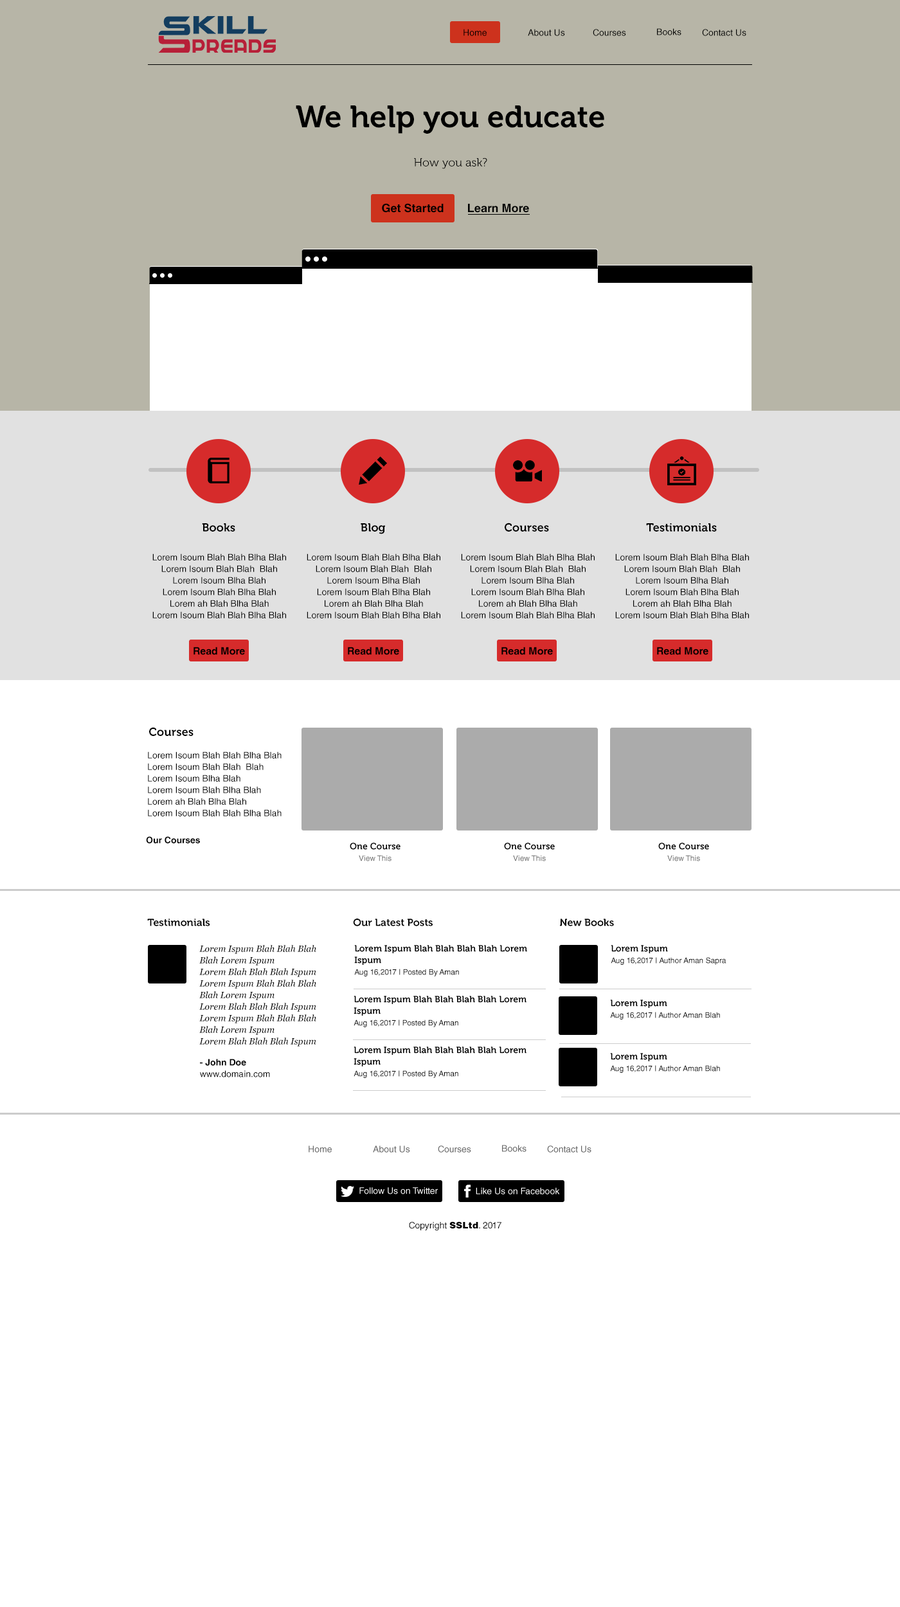
<style>
.page{position:relative;width:900px;height:1607px;background:#ffffff}
.page>*{position:absolute;margin:0}
.t1{font:9px "HelveticaLTStd-Roman";color:#000000}
.t2{font:30.9px "Museo-700";color:#000000}
.t3{font:11.6px "Museo-300";color:#000000}
.t4{font:11.6px "HelveticaLTStd-Bold";color:#000000}
.t5{font:11.6px "Museo-700";color:#000000}
.t6{font:9px/7.3px "HelveticaLTStd-Roman";color:#000000}
.t7{font:10.3px "HelveticaLTStd-Bold";color:#000000}
.t8{font:9px "HelveticaLTStd-Bold";color:#000000}
.t9{font:9px/7.3px "Museo-700";color:#000000}
.t10{font:7.7px/7.3px "HelveticaLTStd-Roman";color:#666666}
.t11{font:10.3px "Museo-700";color:#000000}
.t12{font:9px/11.6px "Georgia-Italic";color:#000000}
.t13{font:9px/11.6px "Museo-700";color:#000000}
.t14{font:7.7px/11.6px "HelveticaLTStd-Roman";color:#000000}
.t15{font:9px/11.6px "HelveticaLTStd-Roman";color:#000000}
.t16{font:9px/11.6px "HelveticaLTStd-Bold";color:#000000}
.t17{font:9px "HelveticaLTStd-Roman";color:#666666}
.t18{font:9px "HelveticaLTStd-Roman";color:#ffffff}
.t19{font:9px "HelveticaLTStd-Blk";color:#000000}
</style>
<div class="page">
<p class="t1" style="left:464px;top:29px;width:23px;height:7px">Home</p>
<p class="t1" style="left:528px;top:29px;width:37px;height:7px">About Us</p>
<p class="t1" style="left:593px;top:29px;width:33px;height:7px">Courses</p>
<p class="t1" style="left:657px;top:28px;width:24px;height:7px">Books</p>
<p class="t1" style="left:702px;top:29px;width:44px;height:7px">Contact Us</p>
<p class="t2" style="left:296px;top:105px;width:308px;height:29px">We help you educate</p>
<p class="t3" style="left:414px;top:158px;width:73px;height:11px">How you ask?</p>
<p class="t4" style="left:382px;top:203px;width:62px;height:10px">Get Started</p>
<p class="t4" style="left:468px;top:204px;width:61px;height:9px">Learn More</p>
<p class="t5" style="left:202px;top:523px;width:33px;height:9px">Books</p>
<p class="t5" style="left:361px;top:523px;width:24px;height:11px">Blog</p>
<p class="t5" style="left:505px;top:523px;width:44px;height:9px">Courses</p>
<p class="t5" style="left:646px;top:523px;width:71px;height:9px">Testimonials</p>
<p class="t6" style="left:152px;top:554px;width:134px;height:64px;text-align:center">Lorem Isoum Blah Blah Blha Blah<br>Lorem Isoum Blah Blah  Blah<br>Lorem Isoum Blha Blah<br>Lorem Isoum Blah Blha Blah<br>Lorem ah Blah Blha Blah<br>Lorem Isoum Blah Blah Blha Blah</p>
<p class="t6" style="left:307px;top:554px;width:133px;height:64px;text-align:center">Lorem Isoum Blah Blah Blha Blah<br>Lorem Isoum Blah Blah  Blah<br>Lorem Isoum Blha Blah<br>Lorem Isoum Blah Blha Blah<br>Lorem ah Blah Blha Blah<br>Lorem Isoum Blah Blah Blha Blah</p>
<p class="t6" style="left:461px;top:554px;width:134px;height:64px;text-align:center">Lorem Isoum Blah Blah Blha Blah<br>Lorem Isoum Blah Blah  Blah<br>Lorem Isoum Blha Blah<br>Lorem Isoum Blah Blha Blah<br>Lorem ah Blah Blha Blah<br>Lorem Isoum Blah Blah Blha Blah</p>
<p class="t6" style="left:615px;top:554px;width:134px;height:64px;text-align:center">Lorem Isoum Blah Blah Blha Blah<br>Lorem Isoum Blah Blah  Blah<br>Lorem Isoum Blha Blah<br>Lorem Isoum Blah Blha Blah<br>Lorem ah Blah Blha Blah<br>Lorem Isoum Blah Blah Blha Blah</p>
<p class="t7" style="left:194px;top:647px;width:51px;height:8px">Read More</p>
<p class="t7" style="left:348px;top:647px;width:51px;height:8px">Read More</p>
<p class="t7" style="left:501px;top:647px;width:52px;height:8px">Read More</p>
<p class="t7" style="left:657px;top:647px;width:51px;height:8px">Read More</p>
<p class="t5" style="left:149px;top:727px;width:45px;height:9px">Courses</p>
<p class="t6" style="left:148px;top:752px;width:134px;height:64px">Lorem Isoum Blah Blah Blha Blah<br>Lorem Isoum Blah Blah  Blah<br>Lorem Isoum Blha Blah<br>Lorem Isoum Blah Blha Blah<br>Lorem ah Blah Blha Blah<br>Lorem Isoum Blah Blah Blha Blah</p>
<p class="t8" style="left:146px;top:836px;width:54px;height:7px">Our Courses</p>
<p class="t9" style="left:350px;top:843px;width:51px;height:18px;text-align:center">One Course<br><span class="t10">View This</span></p>
<p class="t9" style="left:504px;top:843px;width:51px;height:18px;text-align:center">One Course<br><span class="t10">View This</span></p>
<p class="t9" style="left:658px;top:843px;width:51px;height:18px;text-align:center">One Course<br><span class="t10">View This</span></p>
<p class="t11" style="left:147px;top:919px;width:63px;height:7px">Testimonials</p>
<p class="t11" style="left:353px;top:919px;width:80px;height:7px">Our Latest Posts</p>
<p class="t11" style="left:560px;top:919px;width:54px;height:7px">New Books</p>
<p class="t12" style="left:199px;top:945px;width:117px;height:102px">Lorem Ispum Blah Blah Blah<br>Blah Lorem Ispum<br>Lorem Blah Blah Blah Ispum<br>Lorem Ispum Blah Blah Blah<br>Blah Lorem Ispum<br>Lorem Blah Blah Blah Ispum<br>Lorem Ispum Blah Blah Blah<br>Blah Lorem Ispum<br>Lorem Blah Blah Blah Ispum</p>
<p class="t13" style="left:354px;top:945px;width:173px;height:32px">Lorem Ispum Blah Blah Blah Blah Lorem Ispum<br><span class="t14">Aug 16,2017 | Posted By Aman</span></p>
<p class="t14" style="left:611px;top:945px;width:115px;height:20px"><span class="t13">Lorem Ispum<br></span>Aug 16,2017 | Author Aman Sapra</p>
<p class="t13" style="left:354px;top:996px;width:172px;height:31px">Lorem Ispum Blah Blah Blah Blah Lorem Ispum<br><span class="t14">Aug 16,2017 | Posted By Aman</span></p>
<p class="t14" style="left:610px;top:1000px;width:110px;height:20px"><span class="t13">Lorem Ispum<br></span>Aug 16,2017 | Author Aman Blah</p>
<p class="t13" style="left:354px;top:1047px;width:172px;height:31px">Lorem Ispum Blah Blah Blah Blah Lorem Ispum<br><span class="t14">Aug 16,2017 | Posted By Aman</span></p>
<p class="t15" style="left:200px;top:1059px;width:70px;height:18px"><span class="t16">- John Doe<br></span>www.domain.com</p>
<p class="t14" style="left:610px;top:1053px;width:110px;height:20px"><span class="t13">Lorem Ispum<br></span>Aug 16,2017 | Author Aman Blah</p>
<p class="t17" style="left:309px;top:1146px;width:23px;height:7px">Home</p>
<p class="t17" style="left:373px;top:1146px;width:37px;height:7px">About Us</p>
<p class="t17" style="left:438px;top:1146px;width:33px;height:7px">Courses</p>
<p class="t17" style="left:502px;top:1145px;width:24px;height:7px">Books</p>
<p class="t17" style="left:547px;top:1146px;width:44px;height:7px">Contact Us</p>
<p class="t18" style="left:359px;top:1187px;width:79px;height:7px">Follow Us on Twitter</p>
<p class="t18" style="left:476px;top:1187px;width:84px;height:7px">Like Us on Facebook</p>
<p class="t1" style="left:409px;top:1221px;width:92px;height:10px">Copyright <span class="t19">SSLtd</span>. 2017</p>
</div>
